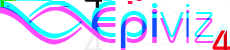
<style>
.page{position:relative;width:230px;height:50px;background:#ffffff}
.page>*{position:absolute;margin:0}
.t1{font:52.1px "BauhausITCbyBT-Medium";scale:1.05 1}
.t2{font:52.1px "BauhausITCbyBT-Light";scale:1.05 1}
.t3{font:36.2px "BauhausITCbyBT-Medium"}
</style>
<div class="page">
<p class="t1" style="left:91px;top:1px;width:123px;height:47px">Epi<span class="t2">viz</span></p>
<p class="t3" style="left:212px;top:24px;width:19px;height:26px">4</p>
</div>
